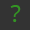
<style>
.page{position:relative;width:30px;height:30px;background:#333333}
.page>*{position:absolute;margin:0}
.t1{font:24px "OpenSans";color:#339523}
</style>
<div class="page">
<p class="t1" style="left:10px;top:5px;width:11px;height:17px">?</p>
</div>
